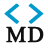
<style>
.page{position:relative;width:48px;height:48px;background:#ffffff}
.page>*{position:absolute;margin:0}
.t1{font:36px "YaHei-Consolas-Hybrid";letter-spacing:0.1em;color:#0099cc;font-weight:bold}
.t2{font:22px "TimesNewRomanPSMT";letter-spacing:0.06em;color:#111111;font-weight:bold}
</style>
<div class="page">
<p class="t1" style="left:4px;top:3px;width:15px;height:21px">&lt;</p>
<p class="t1" style="left:28px;top:3px;width:16px;height:21px">&gt;</p>
<p class="t2" style="left:6px;top:26px;width:38px;height:17px">MD</p>
</div>
